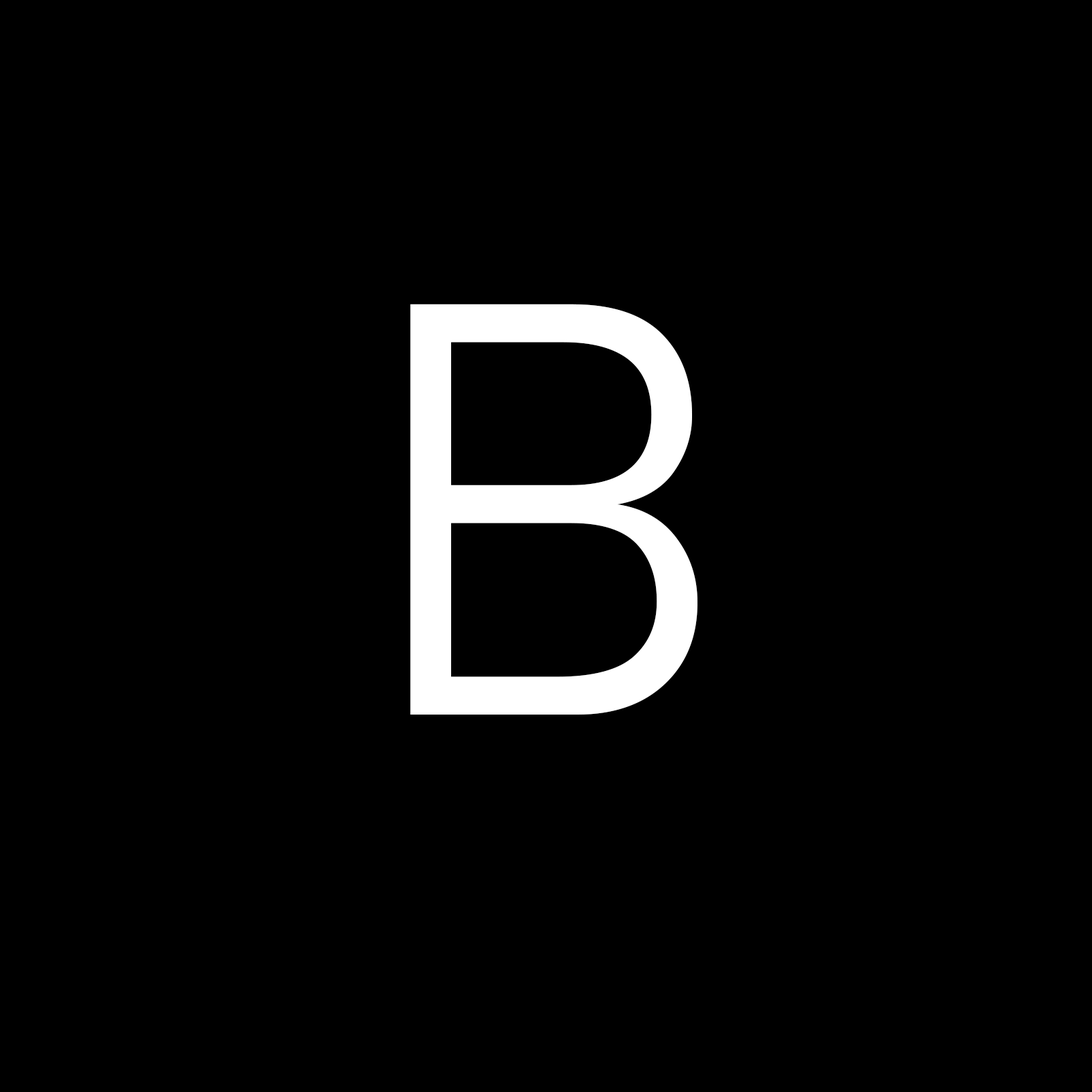
<style>
.page{position:relative;width:1092px;height:1092px;background:#000000}
.page>*{position:absolute;margin:0}
.t1{font:577.8px "Bahnschrift-Light";color:#ffffff}
</style>
<div class="page">
<p class="t1" style="left:410px;top:304px;width:288px;height:411px">B</p>
</div>
